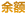
<style>
.page{position:relative;width:27px;height:14px;background:#ffffff}
.page>*{position:absolute;margin:0}
.t1{font:12px "MicrosoftYaHei-Bold";color:#cb850d}
</style>
<div class="page">
<p class="t1" style="left:1px;top:1px;width:24px;height:12px">余额</p>
</div>
